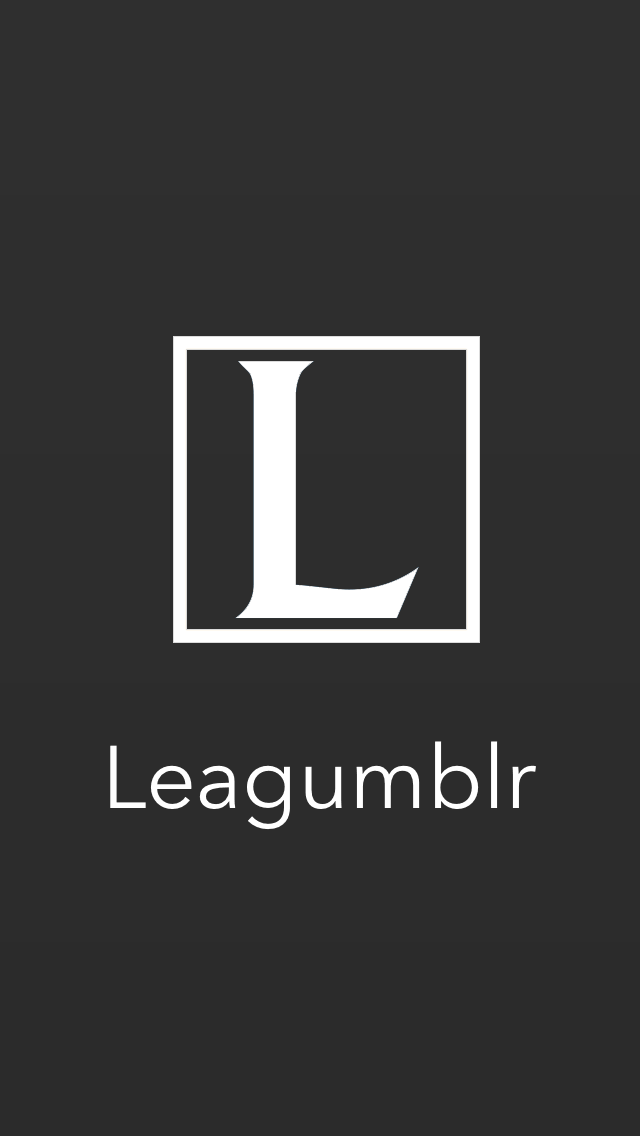
<style>
.page{position:relative;width:640px;height:1136px;background:#2c2c2c}
.page>*{position:absolute;margin:0}
.t1{font:88px "AvenirNext-Regular";color:#ffffff}
</style>
<div class="page">
<p class="t1" style="left:110px;top:741px;width:426px;height:89px">Leagumblr</p>
</div>
